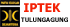
<style>
.page{position:relative;width:70px;height:27px;background:#ffffff}
.page>*{position:absolute;margin:0}
.t1{font:12px "Tahoma-Bold";color:#f32105}
.t2{font:6px "Tahoma-Bold";color:#080807}
</style>
<div class="page">
<p class="t1" style="left:24px;top:3px;width:37px;height:9px">IPTEK</p>
<p class="t2" style="left:21px;top:17px;width:47px;height:5px">TULUNGAGUNG</p>
</div>
